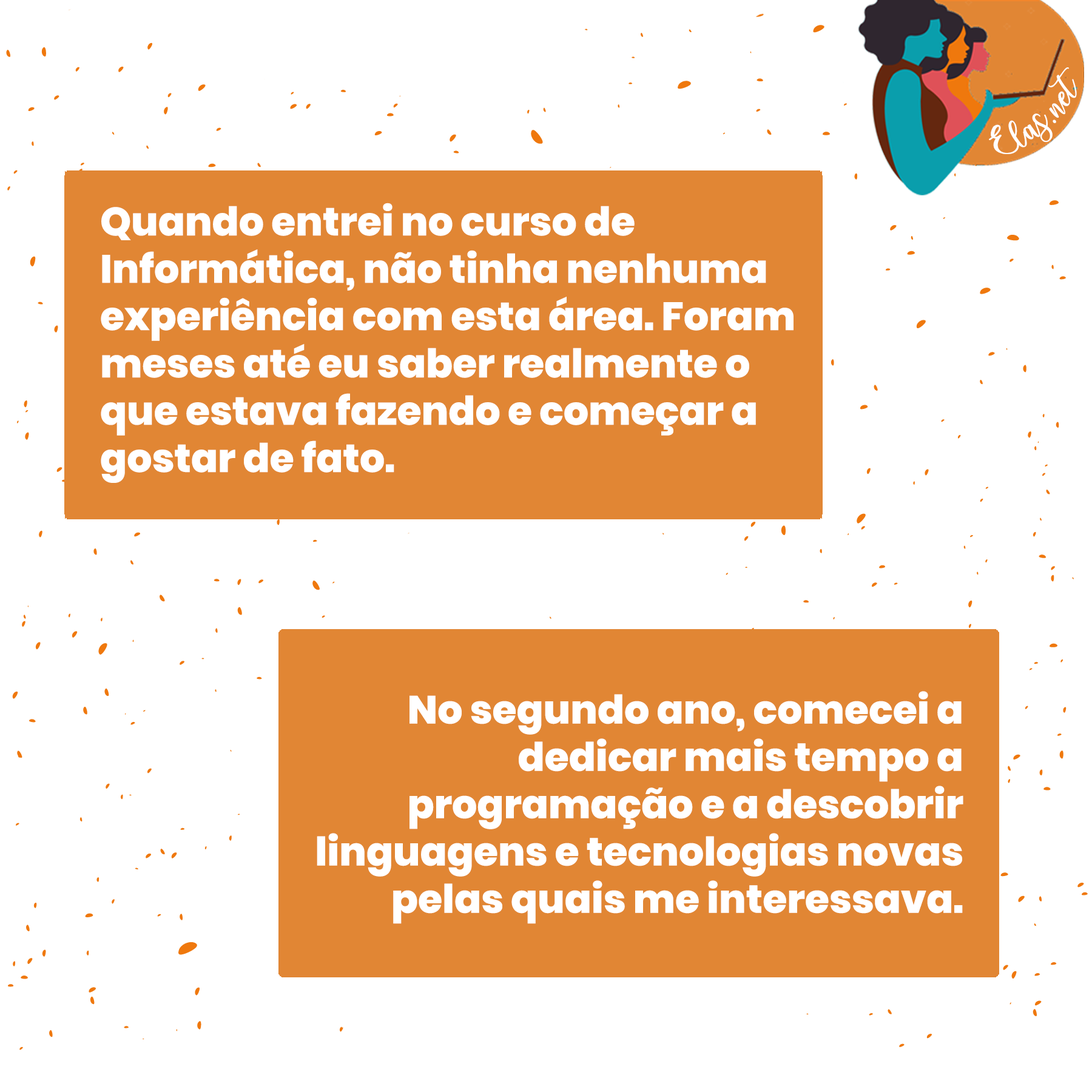
<style>
.page{position:relative;width:1092px;height:1092px;background:#ffffff}
.page>*{position:absolute;margin:0}
.t1{font:25px "charlinda-Regular";color:#ffffff;scale:1.18 1}
.t2{font:39.4px "Poppins-ExtraBold";color:#ffffff}
</style>
<div class="page">
<p class="t1" style="left:989px;top:67px;width:88px;height:87px;rotate:-42deg">Elas.net</p>
<p class="t2" style="left:101px;top:203px;width:693px;height:280px">Quando entrei no curso de Informática, não tinha nenhuma experiência com esta área. Foram meses até eu saber realmente o que estava fazendo e começar a gostar de fato.</p>
<p class="t2" style="left:317px;top:691px;width:646px;height:233px;text-align:right">No segundo ano, comecei a dedicar mais tempo a programação e a descobrir linguagens e tecnologias novas pelas quais me interessava.</p>
</div>
